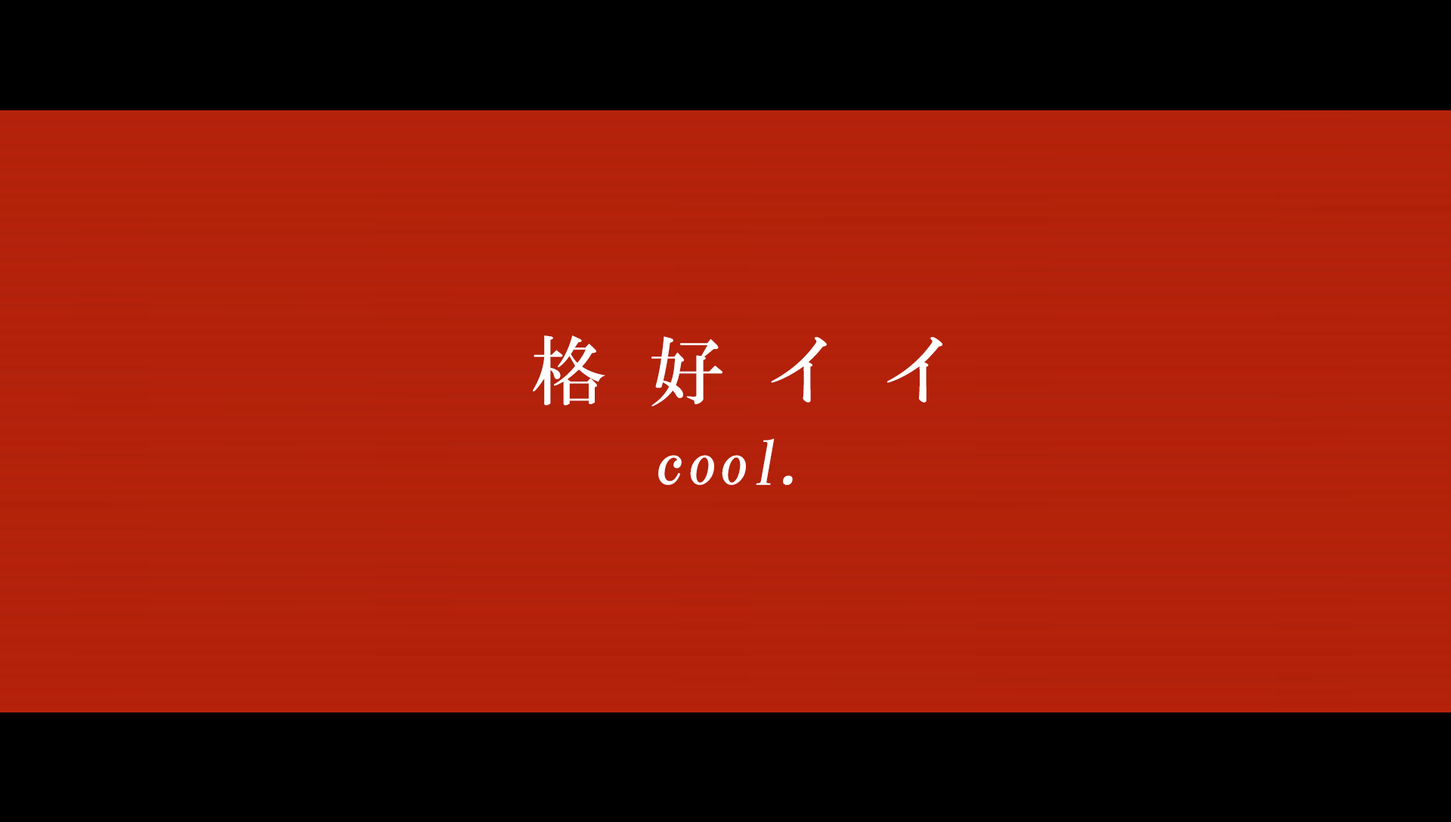
<style>
.page{position:relative;width:1451px;height:822px;background:#000000}
.page>*{position:absolute;margin:0}
.t1{font:74.7px "HGMinchoB";letter-spacing:0.58em;color:#ffffff}
.t2{font:74.7px "HGMinchoB";letter-spacing:0.55em;color:#ffffff}
.t3{font:60.4px "HGMinchoB";letter-spacing:0.025em;color:#ffffff;font-style:italic}
</style>
<div class="page">
<p class="t1" style="left:533px;top:335px;width:410px;height:71px">格好<span class="t2">イ</span>イ</p>
<p class="t3" style="left:658px;top:438px;width:135px;height:47px">cool.</p>
</div>
